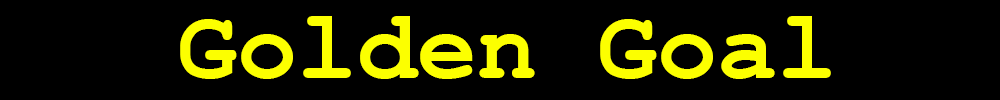
<style>
.page{position:relative;width:1000px;height:100px;background:#000000}
.page>*{position:absolute;margin:0}
.t1{font:100px "CourierNewPS-BoldMT";color:#fcff00}
</style>
<div class="page">
<p class="t1" style="left:180px;top:16px;width:651px;height:63px">Golden Goal</p>
</div>
